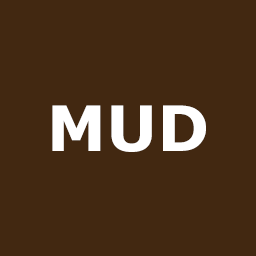
<style>
.page{position:relative;width:256px;height:256px;background:#422811}
.page>*{position:absolute;margin:0}
.t1{font:62.5px "Verdana-Bold";letter-spacing:0.005em;color:#ffffff}
</style>
<div class="page">
<p class="t1" style="left:52px;top:105px;width:154px;height:47px">MUD</p>
</div>
